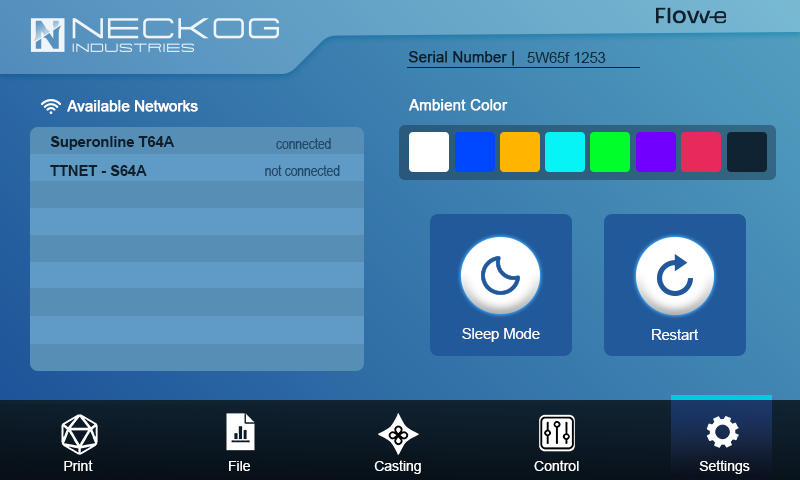
<style>
.page{position:relative;width:800px;height:480px}
.page>*{position:absolute;margin:0}
.t1{font:14.6px "ArialMT";color:#0f1f2d;font-weight:bold}
.t2{font:14.6px "ArialMT";color:#14293b}
.t3{font:14.6px "ArialMT";color:#ffffff;font-weight:bold}
.t4{font:14.6px "Arial-BoldMT";color:#0e1e2a}
.t5{font:14.6px "ArialNarrow";color:#214869}
.t6{font:16.7px "ArialNarrow";color:#214869}
.t7{font:14.6px "ArialMT";color:#ffffff}
.t8{font:14px "ArialMT";color:#ffffff}
</style>
<div class="page">
<p class="t1" style="left:408px;top:51px;width:106px;height:15px">Serial Number |</p>
<p class="t2" style="left:527px;top:52px;width:79px;height:11px">1253 5W65f</p>
<p class="t3" style="left:67px;top:100px;width:131px;height:12px">Available Networks</p>
<p class="t3" style="left:409px;top:99px;width:99px;height:12px">Ambient Color</p>
<p class="t4" style="left:50px;top:136px;width:125px;height:14px">Superonline T64A</p>
<p class="t5" style="left:276px;top:138px;width:55px;height:11px">connected</p>
<p class="t4" style="left:50px;top:165px;width:97px;height:11px">TTNET - S64A</p>
<p class="t5" style="left:265px;top:165px;width:75px;height:11px"><span class="t6"> </span> not connected</p>
<p class="t7" style="left:462px;top:328px;width:78px;height:14px">Sleep Mode</p>
<p class="t7" style="left:652px;top:329px;width:47px;height:11px">Restart</p>
<p class="t8" style="left:64px;top:460px;width:29px;height:11px">Print</p>
<p class="t8" style="left:229px;top:461px;width:21px;height:10px">File</p>
<p class="t8" style="left:374px;top:460px;width:47px;height:14px">Casting</p>
<p class="t8" style="left:534px;top:460px;width:45px;height:11px">Control</p>
<p class="t8" style="left:699px;top:460px;width:51px;height:14px">Settings</p>
</div>
